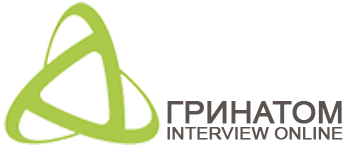
<style>
.page{position:relative;width:350px;height:150px;background:#ffffff}
.page>*{position:absolute;margin:0}
.t1{font:17.5px/16px "ArialMT";color:#5a534f;font-weight:bold}
.t2{font:31.3px/16px "ArialMT";color:#5a534f;font-weight:bold}
</style>
<div class="page">
<p class="t1" style="left:167px;top:101px;width:176px;height:39px;text-align:center"><span class="t2">ГРИНАТОМ<br></span>INTERVIEW ONLINE</p>
</div>
